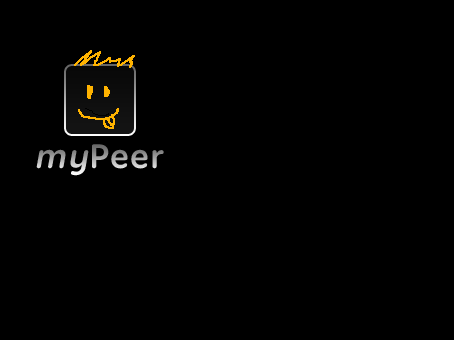
<style>
.page{position:relative;width:454px;height:340px;background:#000000}
.page>*{position:absolute;margin:0}
.t1{font:36px "BlackBerryLove-Bold";letter-spacing:0.025em}
.t2{font:36px "BlackBerryLove-Bold";letter-spacing:0.025em;font-style:italic}
</style>
<div class="page">
<p class="t1" style="left:36px;top:144px;width:128px;height:32px"><span class="t2">my</span>Peer</p>
</div>
